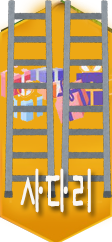
<style>
.page{position:relative;width:112px;height:242px}
.page>*{position:absolute;margin:0}
.t1{font:50px "MHunmin";color:#faf7f2;scale:0.5 1}
.t2{font:50px "MHunmin";color:#f7f6f3;scale:0.5 1}
</style>
<div class="page">
<p class="t1" style="left:20px;top:168px;width:71px;height:45px"><span class="t2">사</span>다리</p>
</div>
